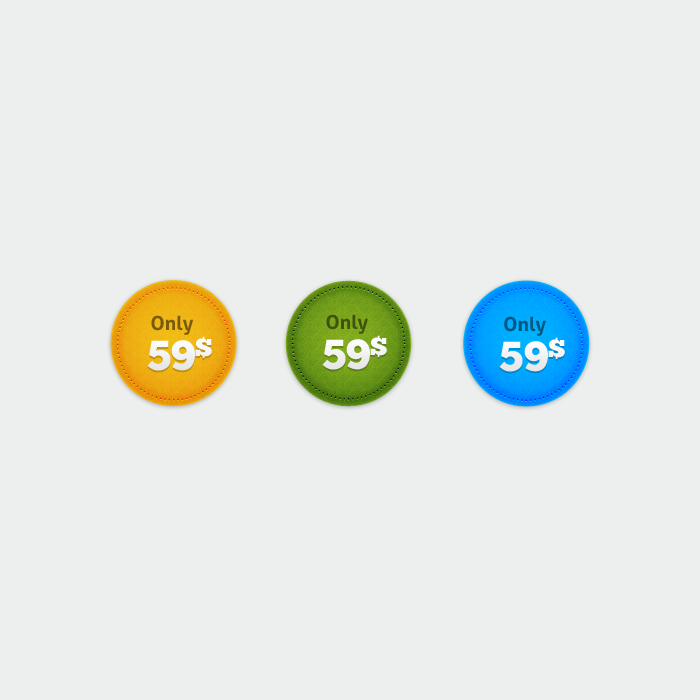
<style>
.page{position:relative;width:700px;height:700px;background:#edeeee}
.page>*{position:absolute;margin:0}
.t1{font:19.6px "Aller-Bold";color:#785c0a}
.t2{font:19.6px "Aller-Bold";color:#3f530e}
.t3{font:19.6px "Aller-Bold";color:#01577f}
.t4{font:42px "ChunkFive-Roman";color:#ffffff}
</style>
<div class="page">
<p class="t1" style="left:151px;top:315px;width:42px;height:20px">Only</p>
<p class="t2" style="left:326px;top:314px;width:42px;height:20px">Only</p>
<p class="t3" style="left:504px;top:316px;width:42px;height:20px">Only</p>
<p class="t4" style="left:147px;top:336px;width:65px;height:35px">59$</p>
<p class="t4" style="left:322px;top:335px;width:65px;height:35px">59$</p>
<p class="t4" style="left:499px;top:337px;width:66px;height:35px">59$</p>
</div>
